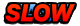
<style>
.page{position:relative;width:80px;height:26px;background:#ffffff}
.page>*{position:absolute;margin:0}
.t1{font:24.2px "TTInterphasesProTrl-XBdIt"}
</style>
<div class="page">
<p class="t1" style="left:5px;top:4px;width:70px;height:18px">SLOW</p>
</div>
